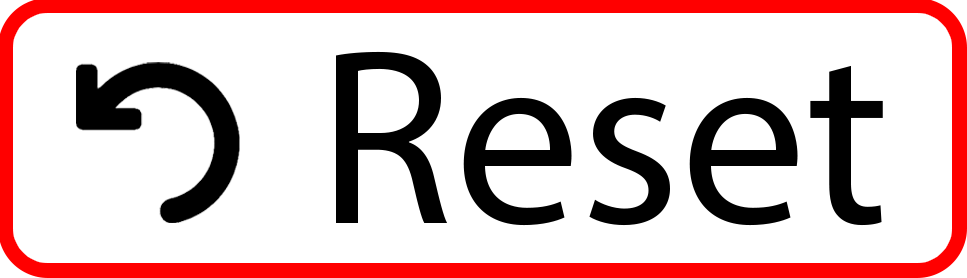
<style>
.page{position:relative;width:967px;height:278px;background:#ffffff}
.page>*{position:absolute;margin:0}
.t1{font:252.1px "MyriadPro-Regular";color:#000000}
</style>
<div class="page">
<p class="t1" style="left:336px;top:51px;width:547px;height:175px">Reset</p>
</div>
